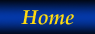
<style>
.page{position:relative;width:95px;height:34px}
.page>*{position:absolute;margin:0}
.t1{font:20px "PalatinoLinotype-BoldItalic";color:#ffdb0f}
</style>
<div class="page">
<p class="t1" style="left:21px;top:10px;width:53px;height:15px">Home</p>
</div>
